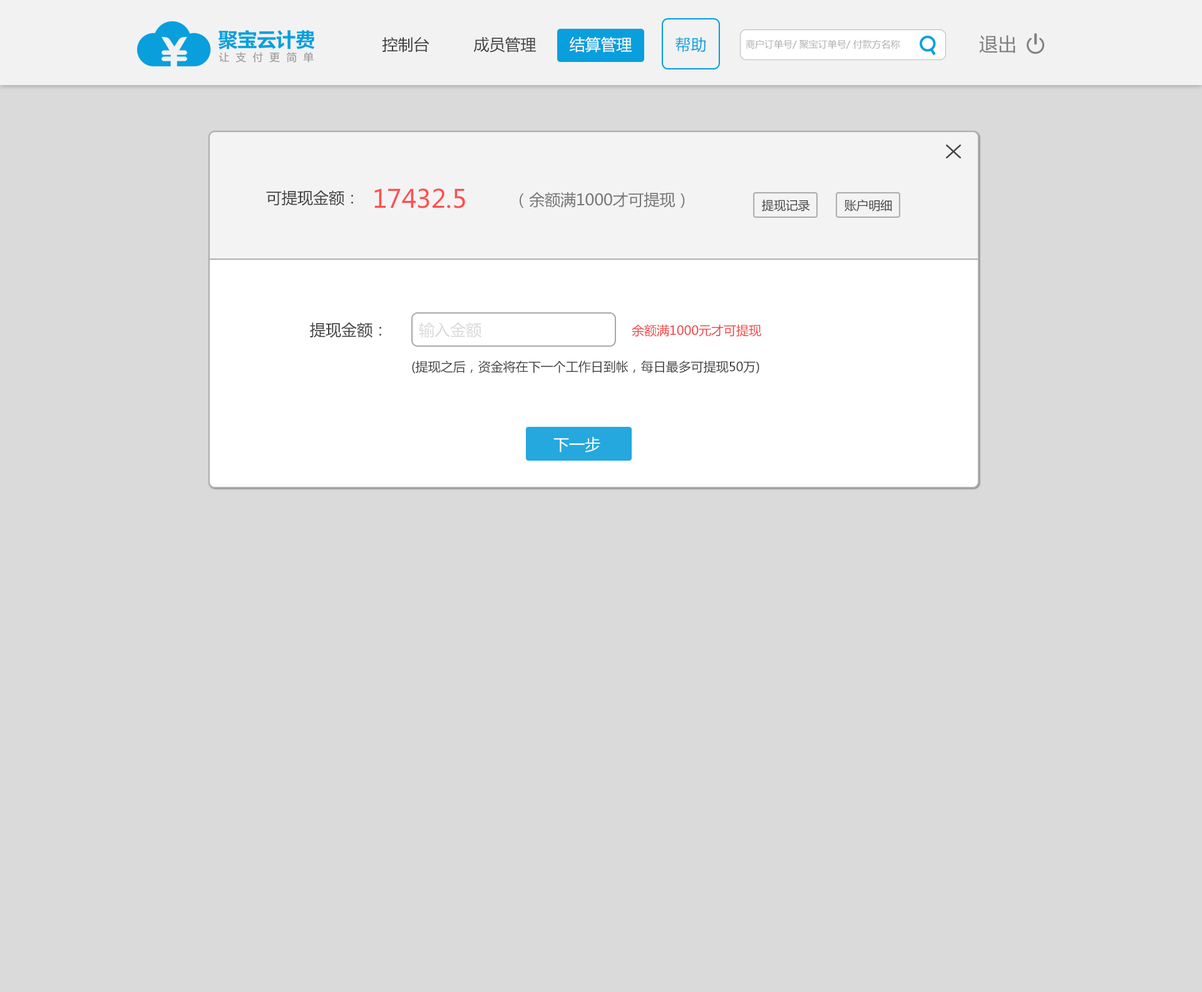
<style>
.page{position:relative;width:1202px;height:992px;background:#dadada}
.page>*{position:absolute;margin:0}
.t1{font:15.6px "MicrosoftYaHei";color:#3f3f3f}
.t2{font:15.6px "MicrosoftYaHei";color:#ffffff}
.t3{font:15.6px "MicrosoftYaHei";color:#099fdd}
.t4{font:9.4px "MicrosoftYaHei";color:#aeaeae}
.t5{font:18.8px "MicrosoftYaHei";color:#7d7d7d}
.t6{font:25px "MicrosoftYaHei";color:#ff4f4f}
.t7{font:15.6px "MicrosoftYaHei";color:#767676}
.t8{font:12px "MicrosoftYaHei";color:#414141}
.t9{font:15.6px "MicrosoftYaHei";color:#d9d9d9}
.t10{font:12.5px "MicrosoftYaHei";color:#f14141}
.t11{font:12.5px "MicrosoftYaHei";color:#3f3f3f}
</style>
<div class="page">
<p class="t1" style="left:382px;top:37px;width:47px;height:16px">控制台</p>
<p class="t1" style="left:473px;top:37px;width:63px;height:16px">成员管理</p>
<p class="t2" style="left:569px;top:37px;width:63px;height:16px">结算管理</p>
<p class="t3" style="left:675px;top:37px;width:30px;height:15px">帮助</p>
<p class="t4" style="left:746px;top:39px;width:154px;height:10px">商户订单号/ 聚宝订单号/ 付款方名称</p>
<p class="t5" style="left:979px;top:35px;width:36px;height:18px">退出</p>
<p class="t1" style="left:266px;top:190px;width:87px;height:16px">可提现金额：</p>
<p class="t6" style="left:374px;top:188px;width:91px;height:20px">17432.5</p>
<p class="t7" style="left:520px;top:192px;width:165px;height:16px">（余额满1000才可提现）</p>
<p class="t8" style="left:762px;top:200px;width:48px;height:12px">提现记录</p>
<p class="t8" style="left:844px;top:199px;width:48px;height:13px">账户明细</p>
<p class="t1" style="left:310px;top:322px;width:71px;height:16px">提现金额：</p>
<p class="t9" style="left:419px;top:322px;width:62px;height:16px">输入金额</p>
<p class="t10" style="left:632px;top:324px;width:129px;height:13px">余额满1000元才可提现</p>
<p class="t11" style="left:412px;top:361px;width:347px;height:13px">(提现之后，资金将在下一个工作日到帐，每日最多可提现50万)</p>
<p class="t2" style="left:553px;top:437px;width:47px;height:16px">下一步</p>
</div>
